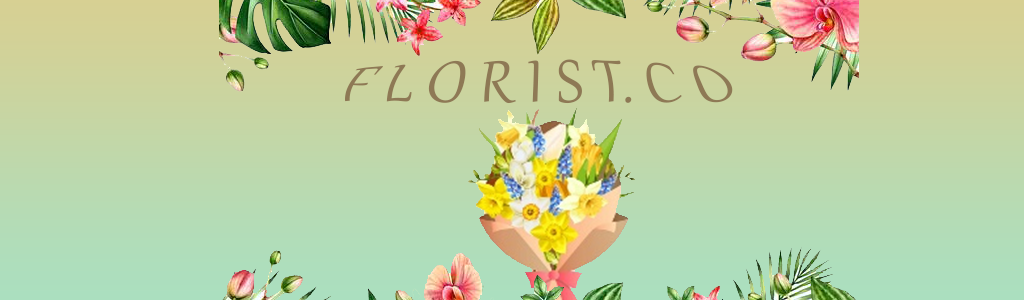
<style>
.page{position:relative;width:1024px;height:300px}
.page>*{position:absolute;margin:0}
.t1{font:60px "Gabriola";color:#8e7955}
</style>
<div class="page">
<p class="t1" style="left:345px;top:59px;width:388px;height:45px">F L O R I S T. C O</p>
</div>
